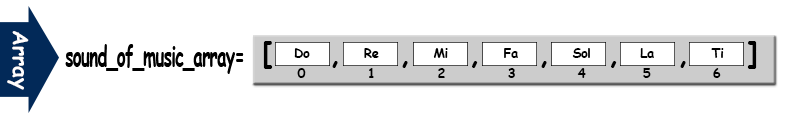
<style>
.page{position:relative;width:800px;height:120px;background:#ffffff}
.page>*{position:absolute;margin:0}
.t1{font:21.3px "ComicSansMS-Bold";color:#fffefe}
.t2{font:28.2px "ComicSansMS-Bold";letter-spacing:-0.025em;color:#000000}
.t3{font:28.2px "ComicSansMS-Bold";letter-spacing:-0.05em;color:#000000;scale:0.61 1}
.t4{font:12.7px "ComicSansMS-Bold";letter-spacing:-0.025em;color:#000000}
</style>
<div class="page">
<p class="t1" style="left:7px;top:31px;width:22px;height:59px;rotate:90deg">Array</p>
<p class="t2" style="left:263px;top:41px;width:494px;height:28px">[     ,     ,     ,     ,     ,     ,     ]</p>
<p class="t3" style="left:65px;top:44px;width:179px;height:30px">sound_of_music_array=</p>
<p class="t4" style="left:294px;top:48px;width:16px;height:10px">Do</p>
<p class="t4" style="left:364px;top:48px;width:15px;height:10px">Re</p>
<p class="t4" style="left:433px;top:48px;width:15px;height:10px">Mi</p>
<p class="t4" style="left:504px;top:48px;width:14px;height:10px">Fa</p>
<p class="t4" style="left:572px;top:48px;width:18px;height:10px">Sol</p>
<p class="t4" style="left:640px;top:48px;width:14px;height:10px">La</p>
<p class="t4" style="left:711px;top:48px;width:13px;height:10px">Ti</p>
<p class="t4" style="left:297px;top:68px;width:424px;height:10px">0            1            2            3            4           5            6</p>
</div>
